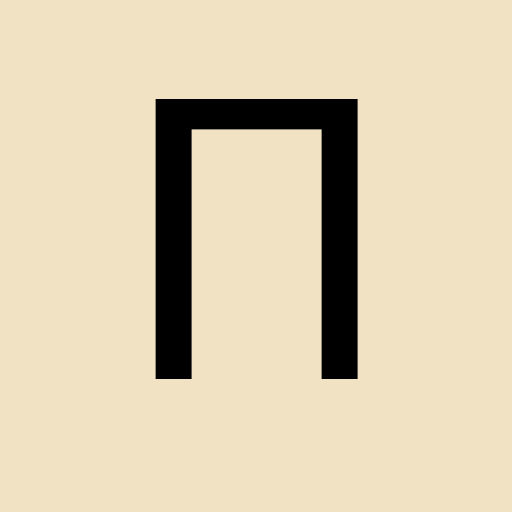
<style>
.page{position:relative;width:512px;height:512px;background:#f0e2c2}
.page>*{position:absolute;margin:0}
.t1{font:415.3px "MyriadPro-Regular";color:#000000}
</style>
<div class="page">
<p class="t1" style="left:155px;top:99px;width:203px;height:280px">П</p>
</div>
